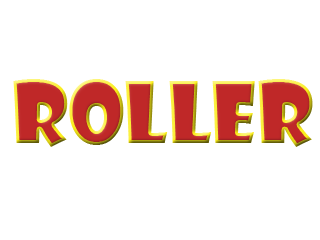
<style>
.page{position:relative;width:320px;height:240px;background:#ffffff}
.page>*{position:absolute;margin:0}
.t1{font:82px "ShowcardGothic-Reg";color:#bf2828}
</style>
<div class="page">
<p class="t1" style="left:13px;top:79px;width:300px;height:68px">Roller</p>
</div>
